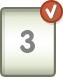
<style>
.page{position:relative;width:63px;height:77px}
.page>*{position:absolute;margin:0}
.t1{font:30px "RotondaC-Bold";letter-spacing:0.04em;color:#828282;text-transform:uppercase}
</style>
<div class="page">
<p class="t1" style="left:20px;top:30px;width:15px;height:23px">3</p>
</div>
